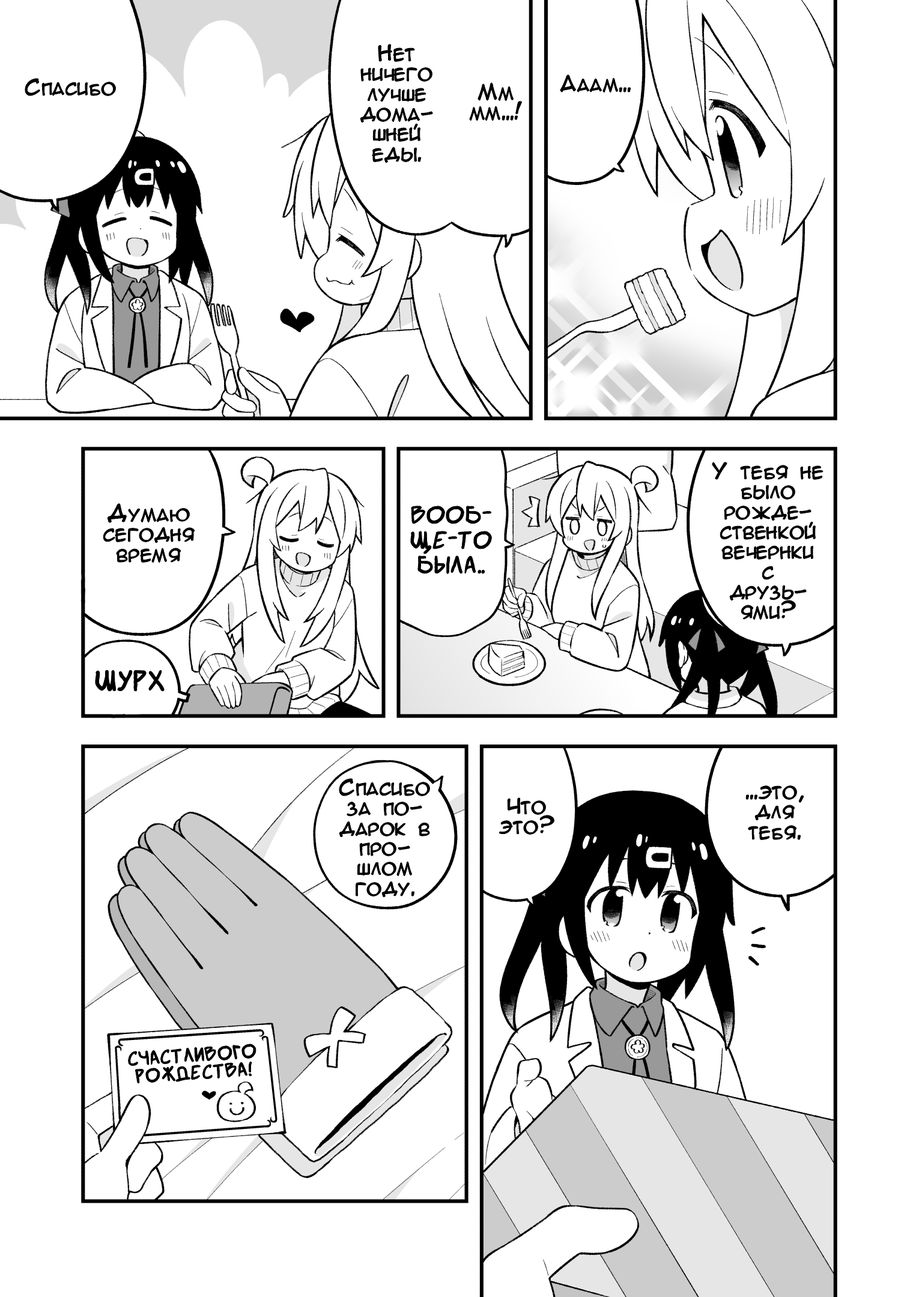
<style>
.page{position:relative;width:919px;height:1297px;background:#ffffff}
.page>*{position:absolute;margin:0}
.t1{font:20px/20px "AnimeAcev3";color:#000000}
.t2{font:20px "AnimeAcev3";color:#000000}
.t3{font:25px/25px "SuperWebcomicBros.Rusbyyakustick";color:#000000}
.t4{font:30px "SuperWebcomicBros.Rusbyyakustick";color:#000000}
.t5{font:20.2px/17.7px "SuperWebcomicBros.Rusbyyakustick";color:#000000}
</style>
<div class="page">
<p class="t1" style="left:360px;top:44px;width:72px;height:119px;text-align:center">Нет<br>ничего<br>лучше<br>дома-<br>шней<br>еды.</p>
<p class="t2" style="left:560px;top:75px;width:71px;height:18px">Ааам...</p>
<p class="t2" style="left:25px;top:79px;width:91px;height:17px">Спасибо</p>
<p class="t1" style="left:470px;top:83px;width:52px;height:38px;text-align:center">Мм<br>мм...!</p>
<p class="t1" style="left:712px;top:463px;width:111px;height:157px;text-align:center">У тебя не<br>было<br>рожде-<br>ственкой<br>вечернки<br>с<br>друзь-<br>ями?</p>
<p class="t1" style="left:103px;top:504px;width:92px;height:59px;text-align:center">Думаю<br>сегодня<br>время</p>
<p class="t3" style="left:411px;top:506px;width:81px;height:68px;text-align:center">Вооб-<br>ще-то<br>была..</p>
<p class="t4" style="left:96px;top:670px;width:68px;height:21px">шурх</p>
<p class="t1" style="left:339px;top:779px;width:91px;height:118px;text-align:center">Спасибо<br>за по-<br>дарок в<br>про-<br>шлом<br>году.</p>
<p class="t1" style="left:746px;top:786px;width:58px;height:54px;text-align:center">...это,<br>для<br>тебя.</p>
<p class="t1" style="left:499px;top:798px;width:55px;height:37px;text-align:center">Что<br>это?</p>
<p class="t5" style="left:128px;top:1045px;width:128px;height:39px;text-align:center;rotate:-4deg">СЧАСТЛИВОГО<br>РОЖДЕСТВА!</p>
</div>
